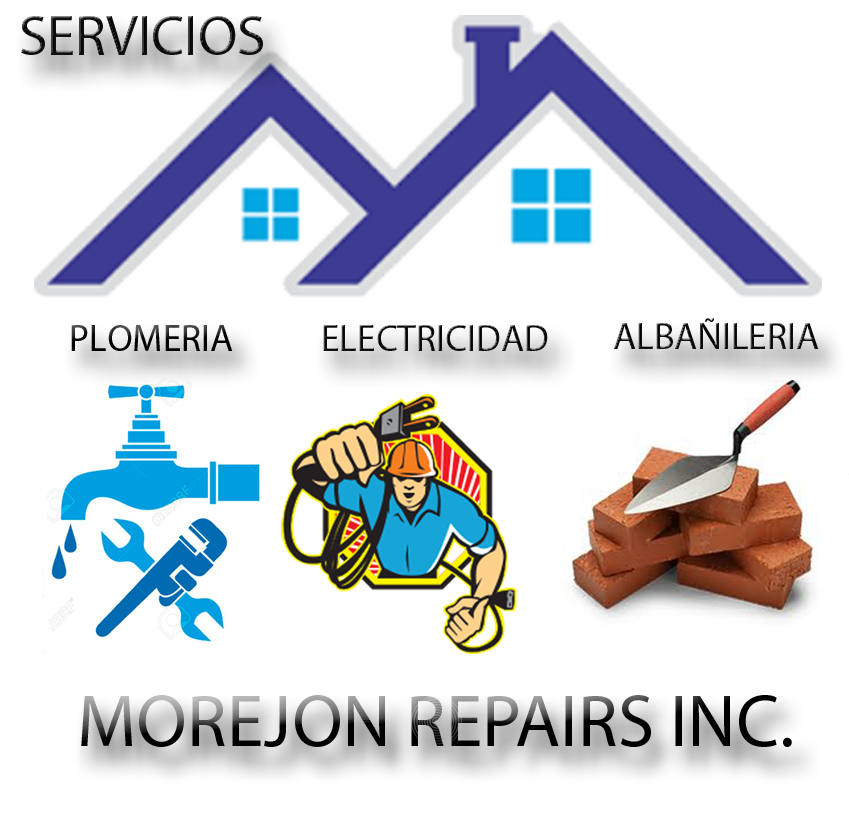
<style>
.page{position:relative;width:849px;height:837px;background:#ffffff}
.page>*{position:absolute;margin:0}
.t1{font:57.1px "MyriadPro-Regular";color:#040404}
.t2{font:37.5px "MyriadPro-Regular";color:#040404}
.t3{font:73.7px "MyriadPro-Regular"}
</style>
<div class="page">
<p class="t1" style="left:21px;top:16px;width:242px;height:39px">SERVICIOS</p>
<p class="t2" style="left:614px;top:318px;width:205px;height:31px">ALBAÑILERIA</p>
<p class="t2" style="left:71px;top:325px;width:162px;height:26px">PLOMERIA</p>
<p class="t2" style="left:323px;top:325px;width:225px;height:26px">ELECTRICIDAD</p>
<p class="t3" style="left:81px;top:695px;width:711px;height:52px">MOREJON REPAIRS INC.</p>
</div>
